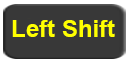
<style>
.page{position:relative;width:128px;height:64px;background:#383838}
.page>*{position:absolute;margin:0}
.t1{font:24px "Arial-BoldMT";color:#ffff00}
</style>
<div class="page">
<p class="t1" style="left:12px;top:20px;width:103px;height:17px">Left Shift</p>
</div>
